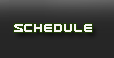
<style>
.page{position:relative;width:114px;height:58px;background:#262626}
.page>*{position:absolute;margin:0}
.t1{font:13px "Usuzi";color:#f6f4f4}
</style>
<div class="page">
<p class="t1" style="left:14px;top:24px;width:78px;height:8px">Schedule</p>
</div>
